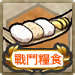
<style>
.page{position:relative;width:75px;height:75px}
.page>*{position:absolute;margin:0}
.t1{font:12px "GothicMB101Pr6N-Medium";color:#ff5a00}
</style>
<div class="page">
<p class="t1" style="left:14px;top:53px;width:48px;height:13px">戰鬥糧食</p>
</div>
